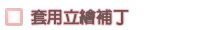
<style>
.page{position:relative;width:200px;height:30px;background:#ffffff}
.page>*{position:absolute;margin:0}
.t1{font:16px "AdobeFanHeitiStd-Bold";color:#7c6a6a;font-weight:bold}
</style>
<div class="page">
<p class="t1" style="left:31px;top:9px;width:98px;height:17px">套用立繪補丁</p>
</div>
